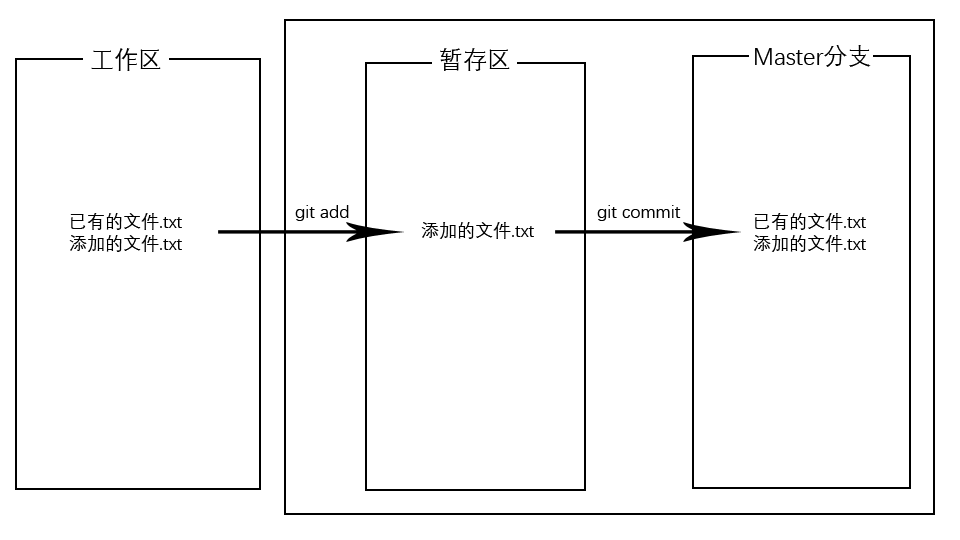
<style>
.page{position:relative;width:960px;height:540px;background:#ffffff}
.page>*{position:absolute;margin:0}
.t1{font:24px "DengXian-Regular";color:#000000}
.t2{font:18px "DengXian-Regular";color:#000000}
</style>
<div class="page">
<p class="t1" style="left:91px;top:48px;width:70px;height:23px">工作区</p>
<p class="t1" style="left:440px;top:48px;width:70px;height:23px">暂存区</p>
<p class="t1" style="left:755px;top:45px;width:116px;height:22px">Master分支</p>
<p class="t2" style="left:295px;top:205px;width:54px;height:16px">git add</p>
<p class="t2" style="left:597px;top:205px;width:84px;height:16px">git commit</p>
<p class="t2" style="left:69px;top:213px;width:113px;height:39px">已有的文件.txt<br>添加的文件.txt</p>
<p class="t2" style="left:421px;top:222px;width:113px;height:17px">添加的文件.txt</p>
<p class="t2" style="left:753px;top:213px;width:113px;height:39px">已有的文件.txt<br>添加的文件.txt</p>
</div>
